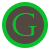
<style>
.page{position:relative;width:50px;height:50px;background:#534741}
.page>*{position:absolute;margin:0}
.t1{font:32.1px "PerpetuaTitlingMT-Light";color:#09c12c}
</style>
<div class="page">
<p class="t1" style="left:12px;top:13px;width:25px;height:23px">G</p>
</div>
